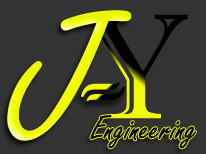
<style>
.page{position:relative;width:206px;height:154px;background:#333333}
.page>*{position:absolute;margin:0}
.t1{font:200px "FreestyleScript-Regular";letter-spacing:0.005em;color:#f2fb06}
.t2{font:150px "ImprintMT-Shadow";letter-spacing:0.005em}
.t3{font:150px "ColonnaMT";letter-spacing:0.005em}
.t4{font:36px "FreestyleScript-Regular";letter-spacing:0.005em;color:#000000}
</style>
<div class="page">
<p class="t1" style="left:7px;top:10px;width:125px;height:131px">J</p>
<p class="t2" style="left:82px;top:14px;width:106px;height:105px">Y</p>
<p class="t3" style="left:81px;top:82px;width:45px;height:19px">-</p>
<p class="t4" style="left:90px;top:115px;width:106px;height:34px">Engineering</p>
</div>
